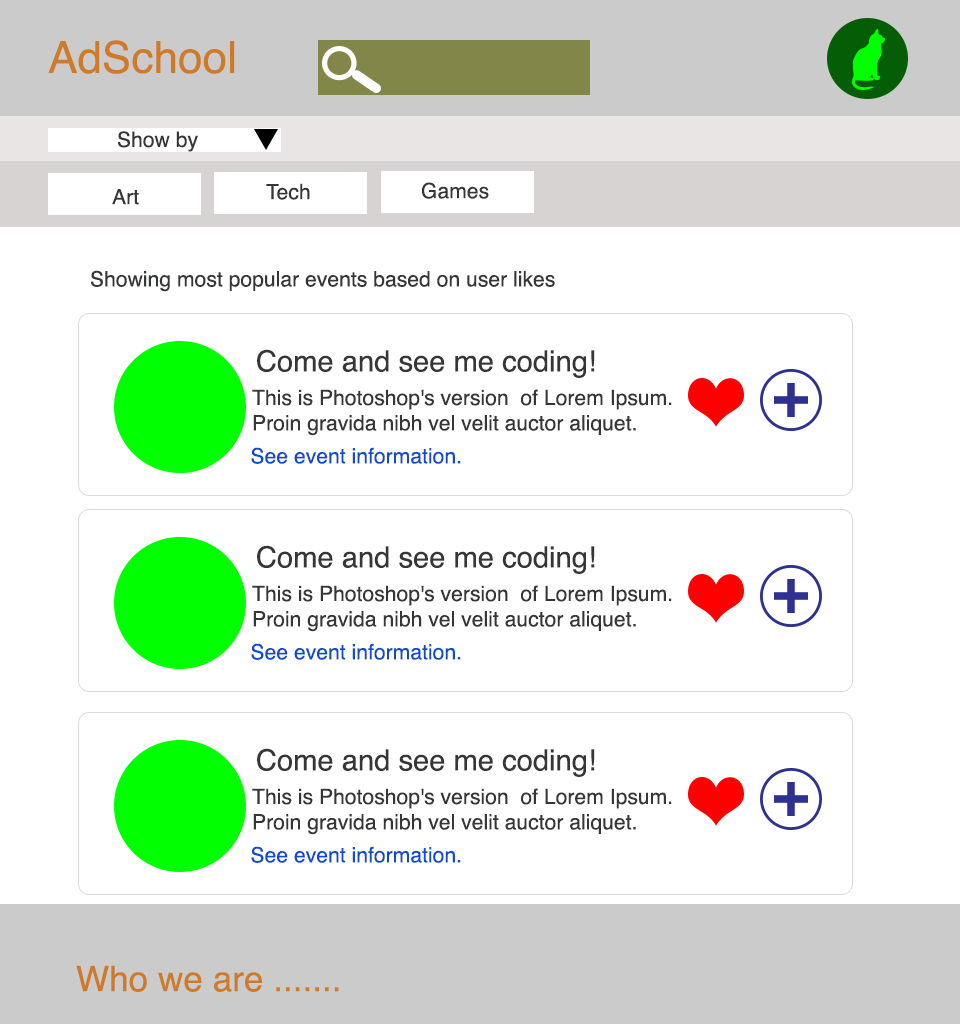
<style>
.page{position:relative;width:960px;height:1024px;background:#ffffff}
.page>*{position:absolute;margin:0}
.t1{font:44px "Helvetica";color:#cf7a29}
.t2{font:21.1px "Helvetica";color:#353637}
.t3{font:29.1px "Helvetica";color:#353637}
.t4{font:21.1px "Helvetica";color:#0f4ad0}
.t5{font:35.1px "Helvetica";color:#cf7a29}
</style>
<div class="page">
<p class="t1" style="left:48px;top:40px;width:187px;height:34px">AdSchool</p>
<p class="t2" style="left:118px;top:131px;width:80px;height:21px">Show by</p>
<p class="t2" style="left:266px;top:183px;width:44px;height:17px">Tech</p>
<p class="t2" style="left:422px;top:182px;width:67px;height:17px">Games</p>
<p class="t2" style="left:112px;top:189px;width:27px;height:16px">Art</p>
<p class="t2" style="left:91px;top:270px;width:464px;height:22px">Showing most popular events based on user likes</p>
<p class="t3" style="left:257px;top:349px;width:338px;height:29px">Come and see me coding!</p>
<p class="t2" style="left:252px;top:389px;width:420px;height:47px">This is Photoshop's version  of Lorem Ipsum. Proin gravida nibh vel velit auctor aliquet.</p>
<p class="t4" style="left:251px;top:447px;width:210px;height:17px">See event information.</p>
<p class="t3" style="left:257px;top:545px;width:338px;height:29px">Come and see me coding!</p>
<p class="t2" style="left:252px;top:585px;width:420px;height:47px">This is Photoshop's version  of Lorem Ipsum. Proin gravida nibh vel velit auctor aliquet.</p>
<p class="t4" style="left:251px;top:643px;width:210px;height:17px">See event information.</p>
<p class="t3" style="left:257px;top:748px;width:338px;height:29px">Come and see me coding!</p>
<p class="t2" style="left:252px;top:788px;width:420px;height:47px">This is Photoshop's version  of Lorem Ipsum. Proin gravida nibh vel velit auctor aliquet.</p>
<p class="t4" style="left:251px;top:846px;width:210px;height:17px">See event information.</p>
<p class="t5" style="left:76px;top:965px;width:263px;height:27px">Who we are .......</p>
</div>
